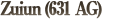
<style>
.page{position:relative;width:120px;height:19px;background:#ffffff}
.page>*{position:absolute;margin:0}
.t1{font:18px "RyuminPro-ExBold";letter-spacing:-0.08em;color:#4a3f32;font-weight:bold;scale:0.9 1}
</style>
<div class="page">
<p class="t1" style="left:0px;top:0px;width:102px;height:19px">Zuiun (631 AG)</p>
</div>
